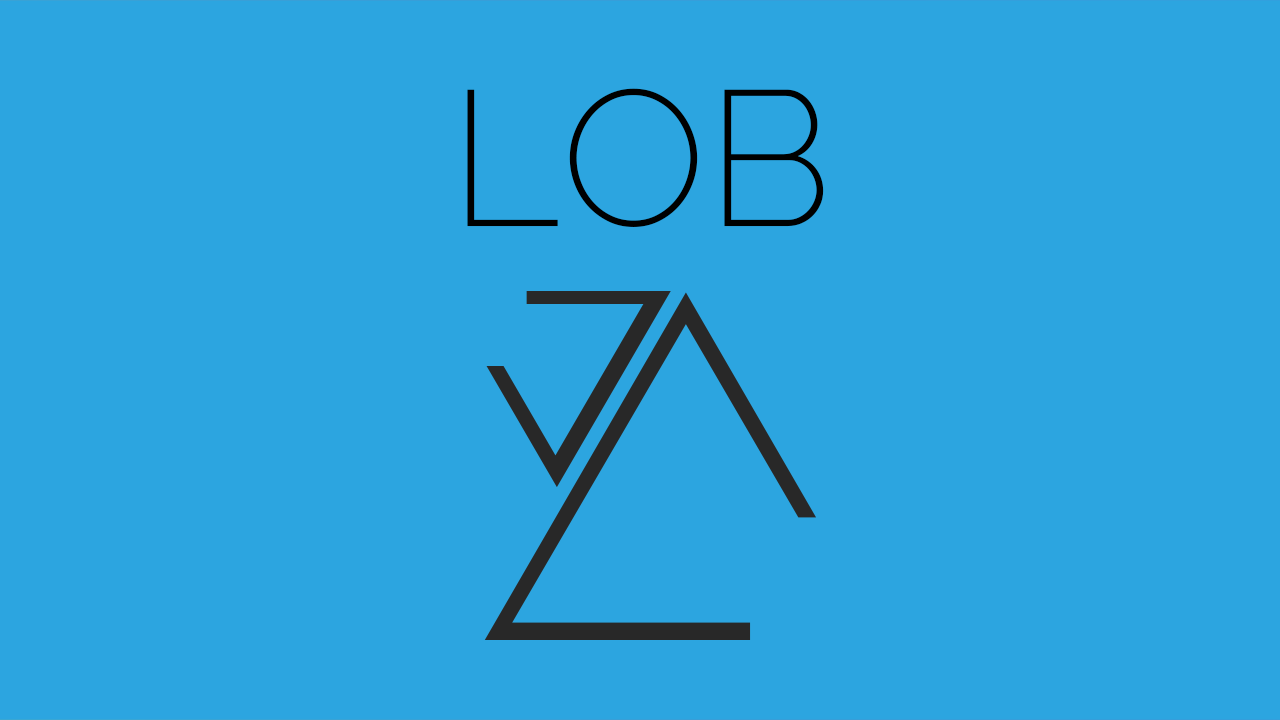
<style>
.page{position:relative;width:1280px;height:720px;background:#2ca5e0}
.page>*{position:absolute;margin:0}
.t1{font:192px "Raleway-ExtraLight";color:#000000}
</style>
<div class="page">
<p class="t1" style="left:467px;top:88px;width:357px;height:139px">LOB</p>
</div>
